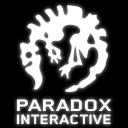
<style>
.page{position:relative;width:128px;height:128px;background:#000000}
.page>*{position:absolute;margin:0}
.t1{font:19.2px "BlenderPro-Bold";color:#ffffff;scale:1.3 1}
.t2{font:15.4px "BlenderPro-Bold";color:#ffffff;scale:1.17 1}
</style>
<div class="page">
<p class="t1" style="left:17px;top:99px;width:95px;height:12px">PARADOX</p>
<p class="t2" style="left:16px;top:114px;width:95px;height:11px">INTERACTIVE</p>
</div>
